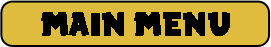
<style>
.page{position:relative;width:271px;height:47px;background:#e0bc3e}
.page>*{position:absolute;margin:0}
.t1{font:18px "SpaceComics";color:#000000}
</style>
<div class="page">
<p class="t1" style="left:41px;top:12px;width:189px;height:24px">MAIN MENU</p>
</div>
